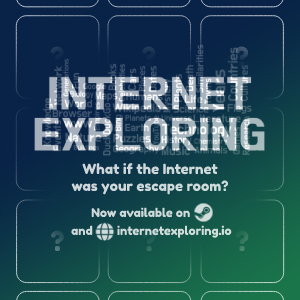
<style>
.page{position:relative;width:300px;height:300px;background:#082347}
.page>*{position:absolute;margin:0}
.t1{font:27.2px "FredokaOne-Regular";color:#142e50}
.t2{font:27.2px "FredokaOne-Regular";color:#173152}
.t3{font:27.2px "FredokaOne-Regular";color:#324c65}
.t4{font:27.2px "FredokaOne-Regular"}
.t5{font:14px "FredokaOne-Regular";color:#cfd8da}
.t6{font:12px/18px "FredokaOne-Regular";color:#cfdbda}
.t7{font:27.2px "FredokaOne-Regular";color:#325b63}
.t8{font:27.2px "FredokaOne-Regular";color:#31765e}
</style>
<div class="page">
<p class="t1" style="left:50px;top:46px;width:14px;height:21px">?</p>
<p class="t2" style="left:142px;top:46px;width:14px;height:21px">?</p>
<p class="t3" style="left:235px;top:46px;width:13px;height:21px">?</p>
<p class="t4" style="left:142px;top:138px;width:14px;height:21px">?</p>
<p class="t5" style="left:71px;top:163px;width:158px;height:32px;text-align:center">What if the Internet<br>was your escape room?</p>
<p class="t6" style="left:71px;top:207px;width:161px;height:31px;text-align:center">Now available on       <br>and        internetexploring.io</p>
<p class="t7" style="left:51px;top:230px;width:13px;height:21px">?</p>
<p class="t8" style="left:235px;top:230px;width:14px;height:21px">?</p>
</div>
